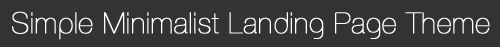
<style>
.page{position:relative;width:500px;height:47px;background:#333333}
.page>*{position:absolute;margin:0}
.t1{font:29px "AovelSans-Light";color:#ffffff;font-weight:bold}
</style>
<div class="page">
<p class="t1" style="left:12px;top:11px;width:478px;height:29px">Simple Minimalist Landing Page Theme</p>
</div>
